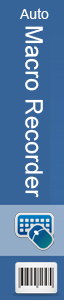
<style>
.page{position:relative;width:64px;height:300px;background:#376498}
.page>*{position:absolute;margin:0}
.t1{font:14px "ArialMT";color:#ffffff}
.t2{font:24px "ArialMT";color:#ffffff}
</style>
<div class="page">
<p class="t1" style="left:20px;top:8px;width:29px;height:11px">Auto</p>
<p class="t2" style="left:25px;top:26px;width:18px;height:172px">Macro Recorder</p>
</div>
